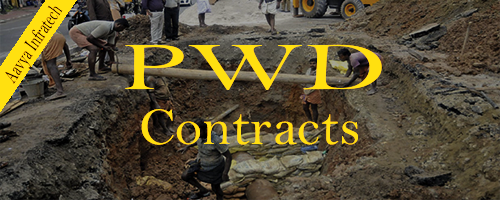
<style>
.page{position:relative;width:500px;height:200px}
.page>*{position:absolute;margin:0}
.t1{font:20.9px "BellMT";color:#000000;scale:0.65 1}
.t2{font:69.2px "BellMT";color:#ffe010;scale:1.6 1}
.t3{font:53.6px "BellMT";color:#ffe010}
</style>
<div class="page">
<p class="t1" style="left:5px;top:5px;width:58px;height:79px;rotate:-56deg">Aavya Infratech</p>
<p class="t2" style="left:125px;top:44px;width:257px;height:46px">PWD</p>
<p class="t3" style="left:141px;top:109px;width:217px;height:36px">Contracts</p>
</div>
